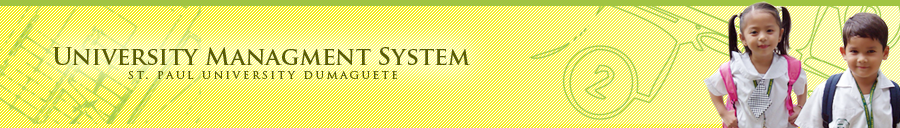
<style>
.page{position:relative;width:900px;height:128px}
.page>*{position:absolute;margin:0}
.t1{font:24px "TrajanPro-Bold";color:#595c06}
.t2{font:12px "TrajanPro-Regular";letter-spacing:0.2em;color:#595c06}
</style>
<div class="page">
<p class="t1" style="left:52px;top:47px;width:418px;height:18px">University Managment System</p>
<p class="t2" style="left:128px;top:71px;width:269px;height:8px">st. paul university dumaguete</p>
</div>
